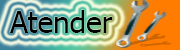
<style>
.page{position:relative;width:180px;height:50px}
.page>*{position:absolute;margin:0}
.t1{font:30.1px "Tahoma";color:#000000}
</style>
<div class="page">
<p class="t1" style="left:10px;top:10px;width:103px;height:23px">Atender</p>
</div>
